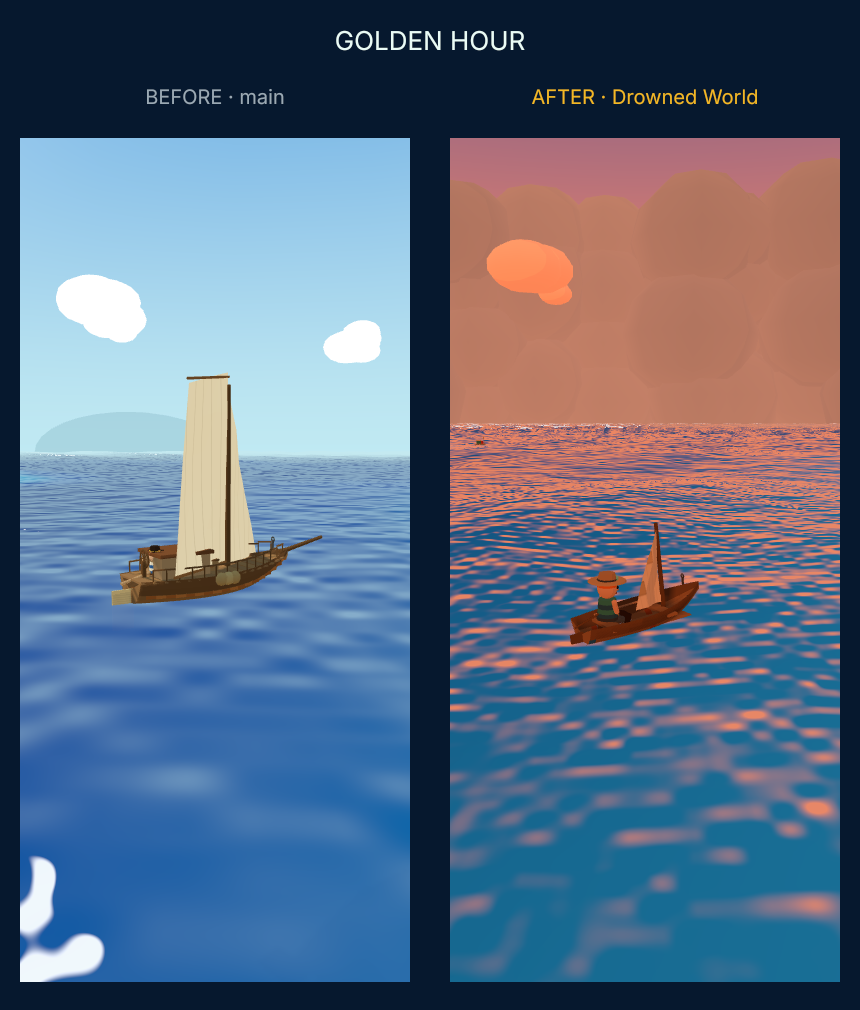
<style>
.page{position:relative;width:860px;height:1010px;background:#06182e}
.page>*{position:absolute;margin:0}
.t1{font:26px "Nunito-Regular";color:#e9fbf6}
.t2{font:20px "Nunito-Regular";color:#9aa9b4}
.t3{font:20px "Nunito-Regular";color:#f2b825}
</style>
<div class="page">
<p class="t1" style="left:335px;top:30px;width:191px;height:22px">GOLDEN HOUR</p>
<p class="t2" style="left:146px;top:88px;width:139px;height:18px">BEFORE · main</p>
<p class="t3" style="left:531px;top:89px;width:227px;height:17px">AFTER · Drowned World</p>
</div>
